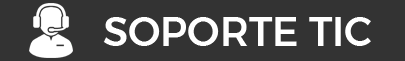
<style>
.page{position:relative;width:405px;height:61px;background:#333333}
.page>*{position:absolute;margin:0}
.t1{font:40px "Montserrat-Medium";color:#ffffff}
</style>
<div class="page">
<p class="t1" style="left:103px;top:17px;width:268px;height:29px">SOPORTE TIC</p>
</div>
